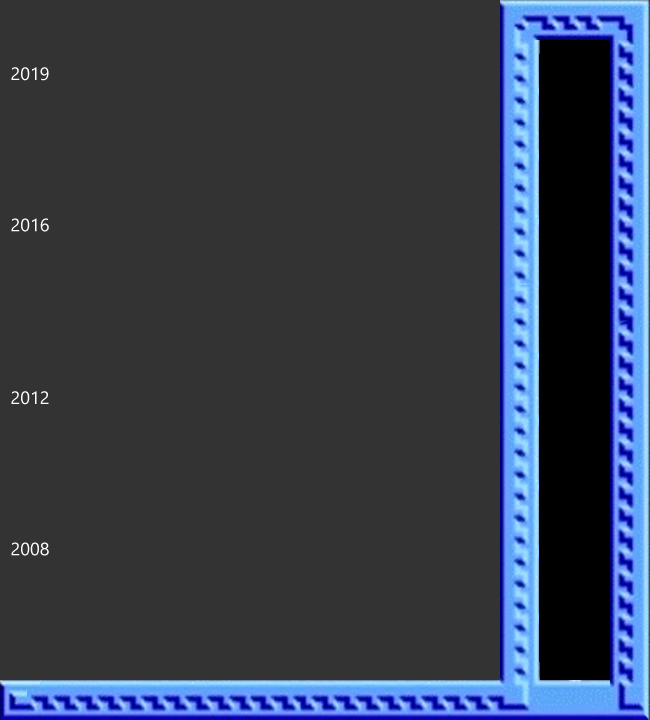
<style>
.page{position:relative;width:650px;height:720px;background:#333333}
.page>*{position:absolute;margin:0}
.t1{font:18px "Gadugi";color:#ffffff}
</style>
<div class="page">
<p class="t1" style="left:11px;top:67px;width:38px;height:489px;text-align:center">2019<br><br><br><br><br><br><br>2016<br><br><br><br><br><br><br><br>2012<br><br><br><br><br><br><br>2008</p>
</div>
